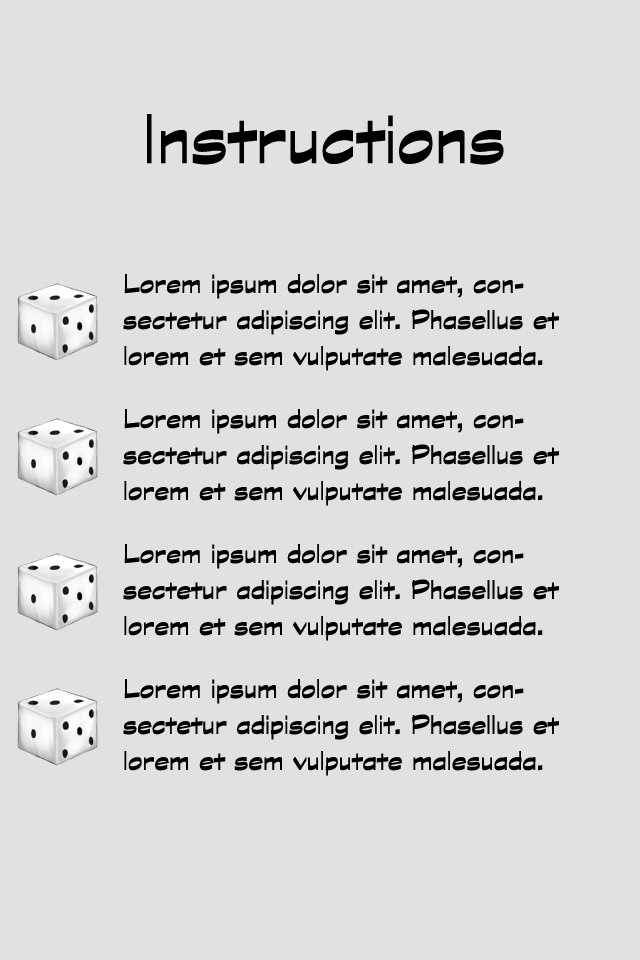
<style>
.page{position:relative;width:640px;height:960px;background:#e1e1e1}
.page>*{position:absolute;margin:0}
.t1{font:78px "GraphiteStd-Bold";color:#000000}
.t2{font:30px "GraphiteStd-Bold";color:#010101}
</style>
<div class="page">
<p class="t1" style="left:147px;top:114px;width:357px;height:51px">Instructions</p>
<p class="t2" style="left:123px;top:274px;width:436px;height:97px">Lorem ipsum dolor sit amet, consectetur adipiscing elit. Phasellus et lorem et sem vulputate malesuada.</p>
<p class="t2" style="left:123px;top:409px;width:436px;height:97px">Lorem ipsum dolor sit amet, consectetur adipiscing elit. Phasellus et lorem et sem vulputate malesuada.</p>
<p class="t2" style="left:123px;top:544px;width:436px;height:97px">Lorem ipsum dolor sit amet, consectetur adipiscing elit. Phasellus et lorem et sem vulputate malesuada.</p>
<p class="t2" style="left:123px;top:679px;width:436px;height:97px">Lorem ipsum dolor sit amet, consectetur adipiscing elit. Phasellus et lorem et sem vulputate malesuada.</p>
</div>
